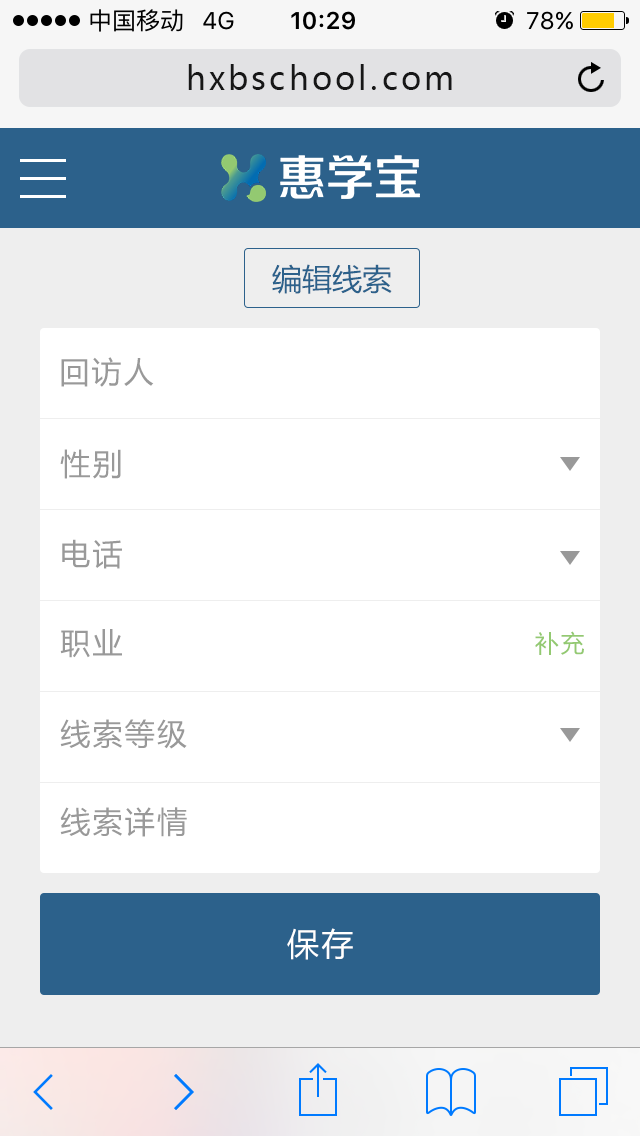
<style>
.page{position:relative;width:640px;height:1136px;background:#ffffff}
.page>*{position:absolute;margin:0}
.t1{font:32px "MicrosoftYaHei";letter-spacing:0.1em;color:#171717}
.t2{font:30px "MicrosoftYaHei";color:#2c618b}
.t3{font:30px "MicrosoftYaHei";letter-spacing:0.075em;color:#999999}
.t4{font:24px "MicrosoftYaHei";letter-spacing:0.075em;color:#93c971}
.t5{font:32px "MicrosoftYaHei";letter-spacing:0.075em;color:#ffffff}
</style>
<div class="page">
<p class="t1" style="left:188px;top:64px;width:264px;height:26px">hxbschool.com</p>
<p class="t2" style="left:272px;top:264px;width:120px;height:30px">编辑线索</p>
<p class="t3" style="left:61px;top:357px;width:93px;height:30px">回访人</p>
<p class="t3" style="left:60px;top:449px;width:61px;height:30px">性别</p>
<p class="t3" style="left:62px;top:539px;width:60px;height:30px">电话</p>
<p class="t3" style="left:60px;top:629px;width:62px;height:29px">职业</p>
<p class="t4" style="left:535px;top:631px;width:49px;height:24px">补充</p>
<p class="t3" style="left:60px;top:719px;width:127px;height:30px">线索等级</p>
<p class="t3" style="left:60px;top:807px;width:127px;height:30px">线索详情</p>
<p class="t5" style="left:287px;top:928px;width:66px;height:32px">保存</p>
</div>
